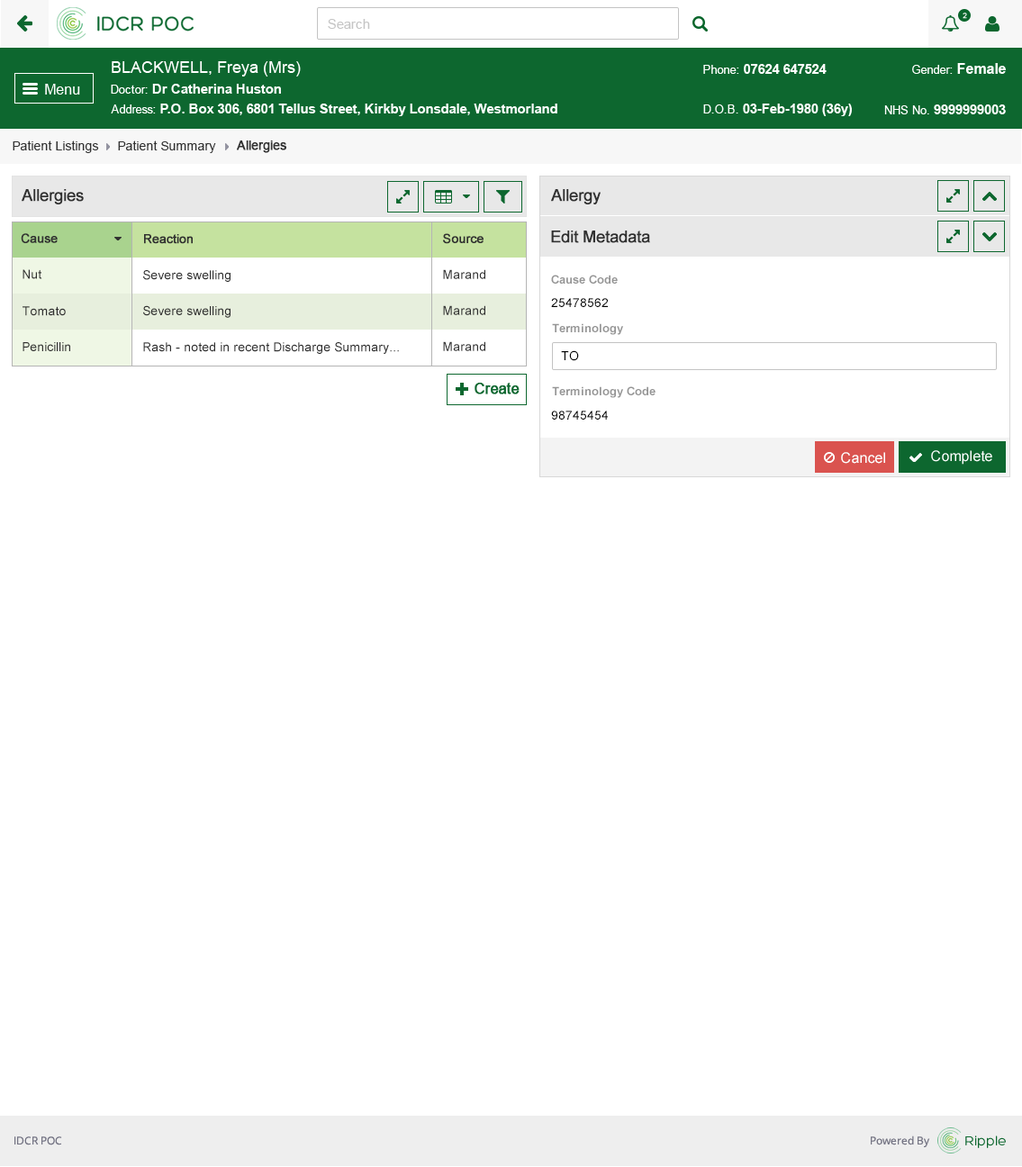
<style>
.page{position:relative;width:1022px;height:1167px;background:#ffffff}
.page>*{position:absolute;margin:0}
.t1{font:12.6px "ArialMT";color:#313131}
.t2{font:12.6px "ArialMT";color:#313131;font-weight:bold}
.t3{font:16.2px "ArialMT";color:#303030;font-weight:bold}
.t4{font:12.6px "ArialMT";color:#303030;font-weight:bold}
.t5{font:12.6px "ArialMT";color:#303030}
.t6{font:11.7px "Arial-BoldMT";color:#959595}
.t7{font:12.6px "ArialMT";color:#000000}
</style>
<div class="page">
<p class="t1" style="left:13px;top:140px;width:86px;height:13px">Patient Listings</p>
<p class="t1" style="left:118px;top:140px;width:98px;height:13px">Patient Summary</p>
<p class="t2" style="left:237px;top:140px;width:49px;height:13px">Allergies</p>
<p class="t3" style="left:22px;top:189px;width:62px;height:15px">Allergies</p>
<p class="t3" style="left:551px;top:189px;width:50px;height:15px">Allergy</p>
<p class="t4" style="left:21px;top:233px;width:37px;height:10px">Cause</p>
<p class="t4" style="left:443px;top:233px;width:40px;height:11px">Source</p>
<p class="t3" style="left:551px;top:230px;width:99px;height:13px">Edit Metadata</p>
<p class="t4" style="left:144px;top:234px;width:49px;height:10px">Reaction</p>
<p class="t5" style="left:23px;top:269px;width:19px;height:10px">Nut</p>
<p class="t5" style="left:443px;top:269px;width:42px;height:10px">Marand</p>
<p class="t5" style="left:143px;top:270px;width:87px;height:12px">Severe swelling</p>
<p class="t6" style="left:551px;top:275px;width:67px;height:9px">Cause Code</p>
<p class="t5" style="left:143px;top:305px;width:87px;height:13px">Severe swelling</p>
<p class="t5" style="left:443px;top:305px;width:42px;height:10px">Marand</p>
<p class="t7" style="left:551px;top:298px;width:57px;height:9px">25478562</p>
<p class="t5" style="left:23px;top:306px;width:43px;height:10px">Tomato</p>
<p class="t6" style="left:552px;top:323px;width:71px;height:12px">Terminology</p>
<p class="t5" style="left:443px;top:341px;width:42px;height:10px">Marand</p>
<p class="t5" style="left:23px;top:342px;width:47px;height:9px">Penicillin</p>
<p class="t5" style="left:143px;top:342px;width:256px;height:12px">Rash - noted in recent Discharge Summary...</p>
<p class="t7" style="left:561px;top:350px;width:18px;height:11px">TO</p>
<p class="t6" style="left:552px;top:386px;width:103px;height:12px">Terminology Code</p>
<p class="t7" style="left:551px;top:411px;width:57px;height:9px">98745454</p>
</div>
